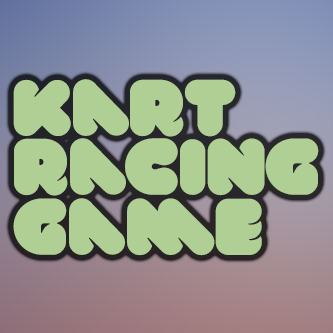
<style>
.page{position:relative;width:333px;height:333px;background:#b0cf95}
.page>*{position:absolute;margin:0}
.t1{font:79.5px/59.6px "VAL";color:#b0cf95}
</style>
<div class="page">
<p class="t1" style="left:13px;top:79px;width:306px;height:177px">kart<br>racing<br>game</p>
</div>
